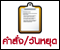
<style>
.page{position:relative;width:60px;height:50px;background:#ffffff}
.page>*{position:absolute;margin:0}
.t1{font:13px "PSLxKittithada-Bold";color:#b60a22;font-weight:bold}
</style>
<div class="page">
<p class="t1" style="left:2px;top:35px;width:55px;height:12px">คำสั่ง/วันหยุด</p>
</div>
